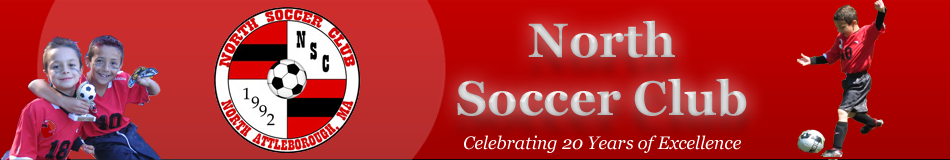
<style>
.page{position:relative;width:950px;height:160px}
.page>*{position:absolute;margin:0}
.t1{font:48px "Georgia-Bold";color:#cdcdcd}
.t2{font:18px "Georgia-Italic";color:#ffffff}
</style>
<div class="page">
<p class="t1" style="left:457px;top:20px;width:290px;height:97px;text-align:center">North<br>Soccer Club</p>
<p class="t2" style="left:464px;top:135px;width:277px;height:18px">Celebrating 20 Years of Excellence</p>
</div>
